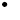
<style>
.page{position:relative;width:20px;height:20px;background:#ffffff}
.page>*{position:absolute;margin:0}
.t1{font:18px "ACaslonPro-Bold";color:#000000}
</style>
<div class="page">
<p class="t1" style="left:2px;top:1px;width:6px;height:6px">•</p>
</div>
